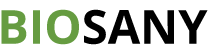
<style>
.page{position:relative;width:209px;height:52px;background:#ffffff}
.page>*{position:absolute;margin:0}
.t1{font:47px "OpenSans-Bold";color:#000000}
.t2{font:47px "OpenSans-Bold";color:#669c41}
</style>
<div class="page">
<p class="t1" style="left:1px;top:9px;width:207px;height:36px"><span class="t2">BIO</span>SANY</p>
</div>
